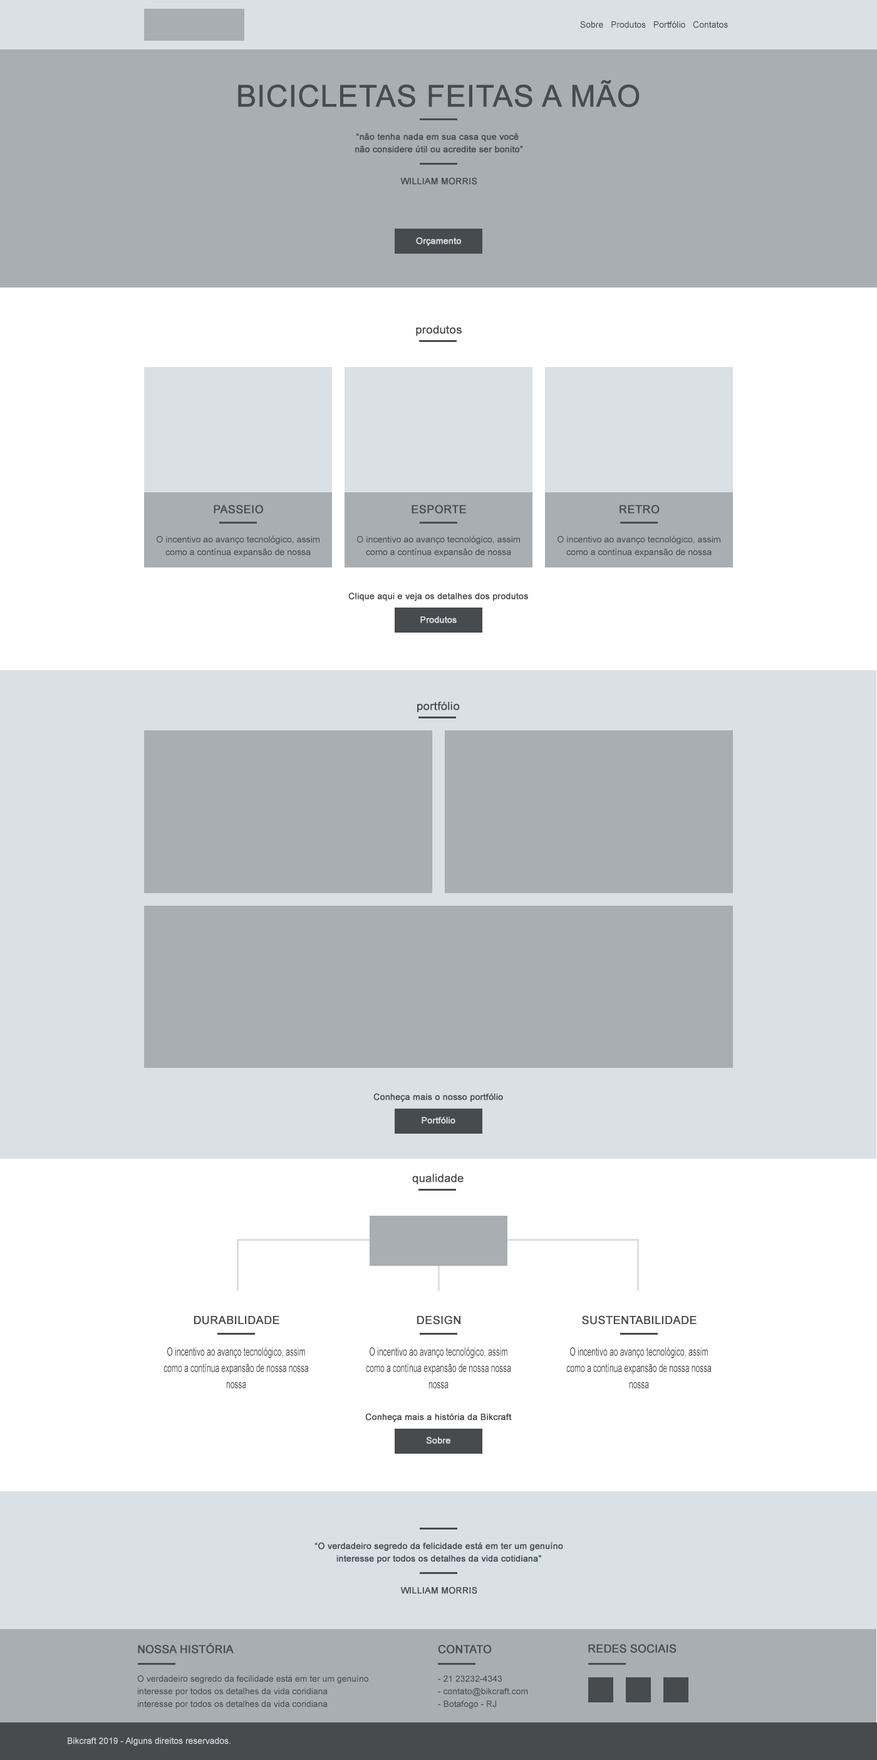
<style>
.page{position:relative;width:877px;height:1760px;background:#ffffff}
.page>*{position:absolute;margin:0}
.t1{font:9px "ArialMT";color:#484b4d}
.t2{font:30.2px "ArialMT";color:#484b4d;font-weight:bold}
.t3{font:8.8px/12.5px "ArialMT";color:#484b4d;font-weight:bold}
.t4{font:8.8px "ArialMT";color:#484b4d;font-weight:bold}
.t5{font:8.8px "ArialMT";color:#d9e0e6;font-weight:bold}
.t6{font:11.2px "ArialMT";color:#484b4d;font-weight:bold}
.t7{font:11.1px "ArialMT";color:#484b4d;font-weight:bold}
.t8{font:8.8px/12.6px "ArialMT";color:#484b4d}
.t9{font:8.7px "ArialMT";color:#484b4d;font-weight:bold}
.t10{font:8.7px "ArialMT";color:#d9e0e6;font-weight:bold}
.t11{font:11.4px/16.3px "ArialMT";color:#484b4d;scale:0.66 1}
.t12{font:11.2px "ArialMT";color:#484b4d;text-transform:uppercase;font-weight:bold}
.t13{font:11.1px "ArialMT";color:#484b4d;text-transform:uppercase;font-weight:bold}
.t14{font:9px "ArialMT";color:#d9e0e6}
</style>
<div class="page">
<p class="t1" style="left:580px;top:21px;width:148px;height:7px">Sobre   Produtos   Portfólio   Contatos</p>
<p class="t2" style="left:238px;top:80px;width:401px;height:27px">BICICLETAS FEITAS A MÃO</p>
<p class="t3" style="left:355px;top:133px;width:168px;height:20px;text-align:center">“não tenha nada em sua casa que você <br>não considere útil ou acredite ser bonito”</p>
<p class="t4" style="left:400px;top:177px;width:77px;height:8px">WILLIAM MORRIS</p>
<p class="t5" style="left:416px;top:237px;width:45px;height:9px">Orçamento</p>
<p class="t6" style="left:416px;top:325px;width:46px;height:11px">produtos</p>
<p class="t7" style="left:214px;top:505px;width:49px;height:9px">PASSEIO</p>
<p class="t7" style="left:411px;top:505px;width:55px;height:9px">ESPORTE</p>
<p class="t7" style="left:619px;top:505px;width:40px;height:9px">RETRO</p>
<p class="t8" style="left:157px;top:535px;width:162px;height:22px;text-align:center">O incentivo ao avanço tecnológico, assim como a contínua expansão de nossa</p>
<p class="t8" style="left:357px;top:535px;width:163px;height:22px;text-align:center">O incentivo ao avanço tecnológico, assim como a contínua expansão de nossa</p>
<p class="t8" style="left:557px;top:535px;width:163px;height:22px;text-align:center">O incentivo ao avanço tecnológico, assim como a contínua expansão de nossa</p>
<p class="t9" style="left:348px;top:592px;width:180px;height:9px">Clique aqui e veja os detalhes dos produtos</p>
<p class="t10" style="left:420px;top:616px;width:37px;height:7px">Produtos</p>
<p class="t6" style="left:417px;top:701px;width:43px;height:11px">portfólio</p>
<p class="t9" style="left:373px;top:1093px;width:130px;height:9px">Conheça mais o nosso portfólio</p>
<p class="t10" style="left:421px;top:1117px;width:34px;height:6px">Portfólio</p>
<p class="t6" style="left:412px;top:1174px;width:51px;height:10px">qualidade</p>
<p class="t6" style="left:194px;top:1316px;width:85px;height:8px">DURABILIDADE</p>
<p class="t6" style="left:417px;top:1315px;width:43px;height:9px">DESIGN</p>
<p class="t6" style="left:582px;top:1315px;width:114px;height:9px">SUSTENTABILIDADE</p>
<p class="t11" style="left:163px;top:1347px;width:146px;height:41px;text-align:center">O incentivo ao avanço tecnológico, assim como a contínua expansão de nossa nossa nossa</p>
<p class="t11" style="left:366px;top:1347px;width:145px;height:41px;text-align:center">O incentivo ao avanço tecnológico, assim como a contínua expansão de nossa nossa nossa</p>
<p class="t11" style="left:566px;top:1347px;width:145px;height:41px;text-align:center">O incentivo ao avanço tecnológico, assim como a contínua expansão de nossa nossa nossa</p>
<p class="t9" style="left:365px;top:1413px;width:147px;height:9px">Conheça mais a história da Bikcraft</p>
<p class="t10" style="left:426px;top:1437px;width:24px;height:6px">Sobre</p>
<p class="t3" style="left:314px;top:1542px;width:249px;height:21px;text-align:center">“O verdadeiro segredo da felicidade está em ter um genuíno<br>interesse por todos os detalhes da vida cotidiana”</p>
<p class="t4" style="left:400px;top:1586px;width:77px;height:8px">WILLIAM MORRIS</p>
<p class="t12" style="left:138px;top:1643px;width:96px;height:10px">Nossa História</p>
<p class="t13" style="left:438px;top:1644px;width:54px;height:9px">contato</p>
<p class="t13" style="left:588px;top:1644px;width:88px;height:9px">redes sociais</p>
<p class="t8" style="left:137px;top:1675px;width:231px;height:33px">O verdadeiro segredo da fecilidade está em ter um genuíno interesse por todos os detalhes da vida coridiana<br>interesse por todos os detalhes da vida coridiana</p>
<p class="t8" style="left:438px;top:1675px;width:90px;height:33px">- 21 23232-4343<br>- contato@bikcraft.com<br>- Botafogo - RJ</p>
<p class="t14" style="left:68px;top:1737px;width:162px;height:8px">Bikcraft 2019 - Alguns direitos reservados.</p>
</div>
